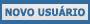
<style>
.page{position:relative;width:90px;height:24px;background:#336ca1}
.page>*{position:absolute;margin:0}
.t1{font:10px "Verdana-Bold";color:#336ca1;scale:0.9 1}
</style>
<div class="page">
<p class="t1" style="left:5px;top:5px;width:80px;height:12px">NOVO USUÁRIO</p>
</div>
